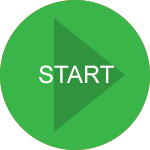
<style>
.page{position:relative;width:150px;height:150px;background:#39b54a}
.page>*{position:absolute;margin:0}
.t1{font:24px "ArialMT";color:#ffffff}
</style>
<div class="page">
<p class="t1" style="left:39px;top:65px;width:75px;height:19px">START</p>
</div>
